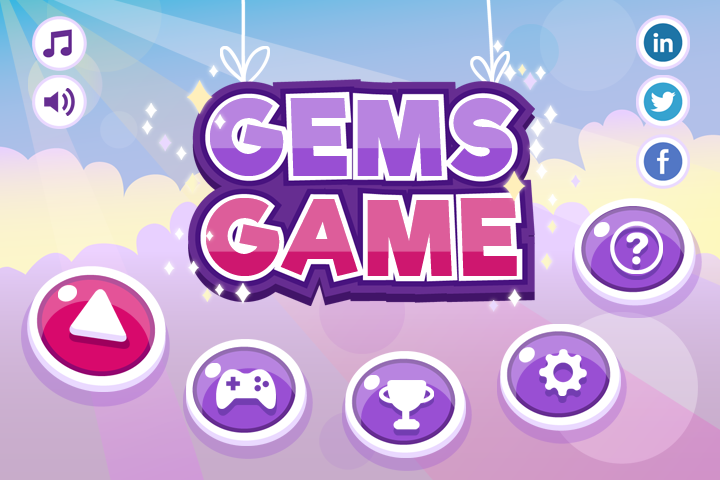
<style>
.page{position:relative;width:720px;height:480px}
.page>*{position:absolute;margin:0}
.t1{font:100.4px/100.4px "RifficFree-Bold";letter-spacing:0.075em}
</style>
<div class="page">
<p class="t1" style="left:206px;top:98px;width:311px;height:178px;text-align:center">GEMS <br>GAME</p>
<p class="t1" style="left:206px;top:98px;width:311px;height:178px;text-align:center">GEMS <br>GAME</p>
</div>
